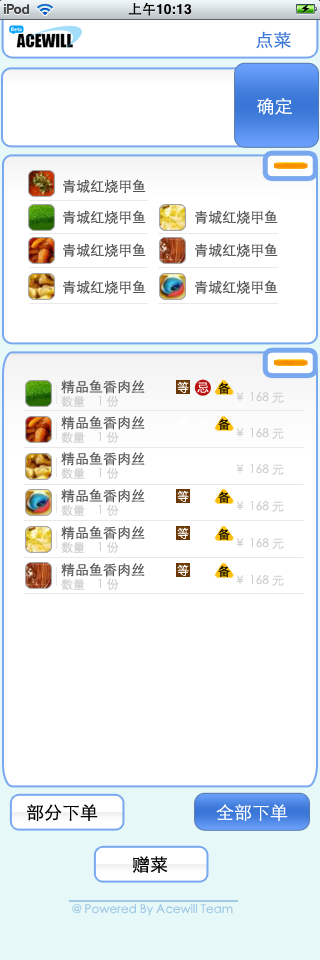
<style>
.page{position:relative;width:320px;height:960px;background:#ffffff}
.page>*{position:absolute;margin:0}
.t1{font:18px "STXihei";color:#3b77d7}
.t2{font:18px "STXihei";color:#ffffff}
.t3{font:14px "STXihei";color:#545454}
.t4{font:12px "STXihei";color:#ffffff}
.t5{font:12px "STXihei";color:#000000}
.t6{font:12px "STXihei";color:#cecece}
.t7{font:18px "STXihei";color:#000000}
.t8{font:12px "STXihei";color:#a2c8e5}
</style>
<div class="page">
<p class="t1" style="left:256px;top:31px;width:35px;height:18px">点菜</p>
<p class="t2" style="left:257px;top:98px;width:35px;height:17px">确定</p>
<p class="t3" style="left:63px;top:179px;width:83px;height:14px">青城红烧甲鱼</p>
<p class="t3" style="left:63px;top:210px;width:83px;height:14px">青城红烧甲鱼</p>
<p class="t3" style="left:195px;top:210px;width:83px;height:14px">青城红烧甲鱼</p>
<p class="t3" style="left:63px;top:243px;width:83px;height:14px">青城红烧甲鱼</p>
<p class="t3" style="left:195px;top:243px;width:83px;height:14px">青城红烧甲鱼</p>
<p class="t3" style="left:63px;top:280px;width:83px;height:14px">青城红烧甲鱼</p>
<p class="t3" style="left:195px;top:280px;width:83px;height:14px">青城红烧甲鱼</p>
<p class="t3" style="left:61px;top:380px;width:84px;height:14px">精品鱼香肉丝</p>
<p class="t4" style="left:177px;top:381px;width:12px;height:12px">等</p>
<p class="t4" style="left:197px;top:382px;width:12px;height:11px">忌</p>
<p class="t5" style="left:218px;top:382px;width:12px;height:12px">备</p>
<p class="t6" style="left:61px;top:395px;width:58px;height:12px">数量    1 份</p>
<p class="t6" style="left:236px;top:392px;width:48px;height:11px">￥ 168 元</p>
<p class="t3" style="left:61px;top:416px;width:84px;height:14px">精品鱼香肉丝</p>
<p class="t5" style="left:218px;top:418px;width:12px;height:12px">备</p>
<p class="t6" style="left:61px;top:431px;width:58px;height:12px">数量    1 份</p>
<p class="t6" style="left:236px;top:428px;width:48px;height:11px">￥ 168 元</p>
<p class="t3" style="left:61px;top:452px;width:84px;height:14px">精品鱼香肉丝</p>
<p class="t6" style="left:61px;top:467px;width:58px;height:12px">数量    1 份</p>
<p class="t6" style="left:236px;top:464px;width:48px;height:11px">￥ 168 元</p>
<p class="t3" style="left:61px;top:489px;width:84px;height:14px">精品鱼香肉丝</p>
<p class="t4" style="left:177px;top:490px;width:12px;height:12px">等</p>
<p class="t5" style="left:218px;top:491px;width:12px;height:12px">备</p>
<p class="t6" style="left:61px;top:504px;width:58px;height:12px">数量    1 份</p>
<p class="t6" style="left:236px;top:501px;width:48px;height:11px">￥ 168 元</p>
<p class="t3" style="left:61px;top:526px;width:84px;height:14px">精品鱼香肉丝</p>
<p class="t4" style="left:177px;top:527px;width:12px;height:12px">等</p>
<p class="t5" style="left:218px;top:528px;width:12px;height:12px">备</p>
<p class="t6" style="left:61px;top:541px;width:58px;height:12px">数量    1 份</p>
<p class="t6" style="left:236px;top:538px;width:48px;height:11px">￥ 168 元</p>
<p class="t3" style="left:61px;top:563px;width:84px;height:14px">精品鱼香肉丝</p>
<p class="t4" style="left:177px;top:564px;width:12px;height:12px">等</p>
<p class="t5" style="left:218px;top:565px;width:12px;height:12px">备</p>
<p class="t6" style="left:61px;top:578px;width:58px;height:12px">数量    1 份</p>
<p class="t6" style="left:236px;top:575px;width:48px;height:11px">￥ 168 元</p>
<p class="t7" style="left:27px;top:804px;width:71px;height:17px">部分下单</p>
<p class="t2" style="left:216px;top:804px;width:72px;height:17px">全部下单</p>
<p class="t7" style="left:133px;top:856px;width:35px;height:17px">赠菜</p>
<p class="t8" style="left:72px;top:904px;width:161px;height:12px">@ Powered By Acewill Team</p>
</div>
